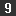
<style>
.page{position:relative;width:16px;height:16px;background:#333333}
.page>*{position:absolute;margin:0}
.t1{font:14.4px "System";color:#ffffff}
</style>
<div class="page">
<p class="t1" style="left:5px;top:3px;width:6px;height:10px">9</p>
</div>
